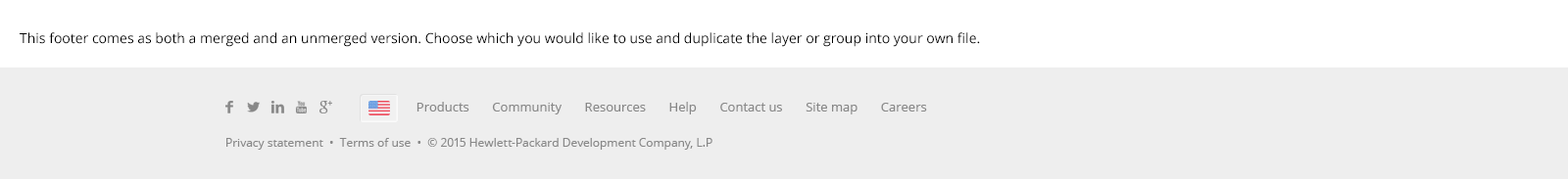
<style>
.page{position:relative;width:1568px;height:179px;background:#eeeeee}
.page>*{position:absolute;margin:0}
.t1{font:12.7px "OpenSans";color:#888888}
.t2{font:11.8px "OpenSans";color:#888888}
</style>
<div class="page">
<p class="t1" style="left:416px;top:102px;width:511px;height:13px">Products       Community       Resources       Help       Contact us       Site map       Careers</p>
<p class="t2" style="left:226px;top:138px;width:486px;height:12px">Privacy statement  •  Terms of use  •  © 2015 Hewlett-Packard Development Company, L.P</p>
</div>
